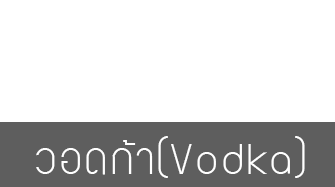
<style>
.page{position:relative;width:335px;height:187px;background:#ffffff}
.page>*{position:absolute;margin:0}
.t1{font:40.9px "BangnaNew";color:#ffffff}
</style>
<div class="page">
<p class="t1" style="left:36px;top:136px;width:269px;height:42px">วอดก้า(Vodka)</p>
</div>
